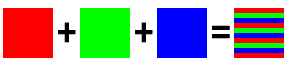
<style>
.page{position:relative;width:300px;height:67px;background:#ffffff}
.page>*{position:absolute;margin:0}
.t1{font:36px "StencilStd";letter-spacing:0.075em;color:#000000}
</style>
<div class="page">
<p class="t1" style="left:58px;top:22px;width:18px;height:21px">+</p>
<p class="t1" style="left:135px;top:22px;width:18px;height:21px">+</p>
<p class="t1" style="left:212px;top:25px;width:18px;height:14px">=</p>
</div>
